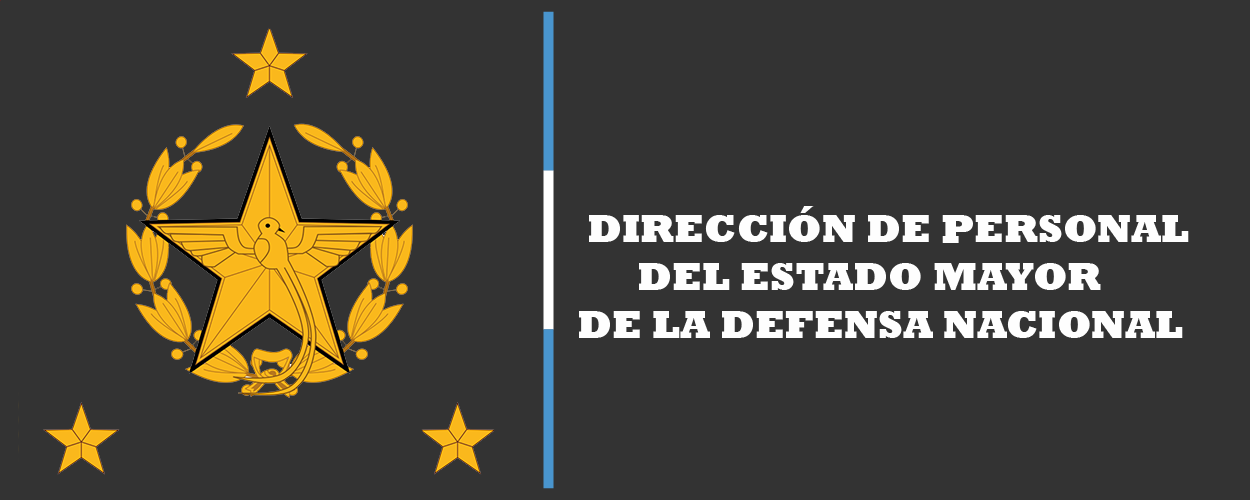
<style>
.page{position:relative;width:1250px;height:500px;background:#333333}
.page>*{position:absolute;margin:0}
.t1{font:40px "Rockwell-ExtraBold";color:#fefefe}
</style>
<div class="page">
<p class="t1" style="left:579px;top:206px;width:610px;height:132px">DIRECCIÓN DE PERSONAL <br>      DEL ESTADO MAYOR <br>DE LA DEFENSA NACIONAL</p>
</div>
